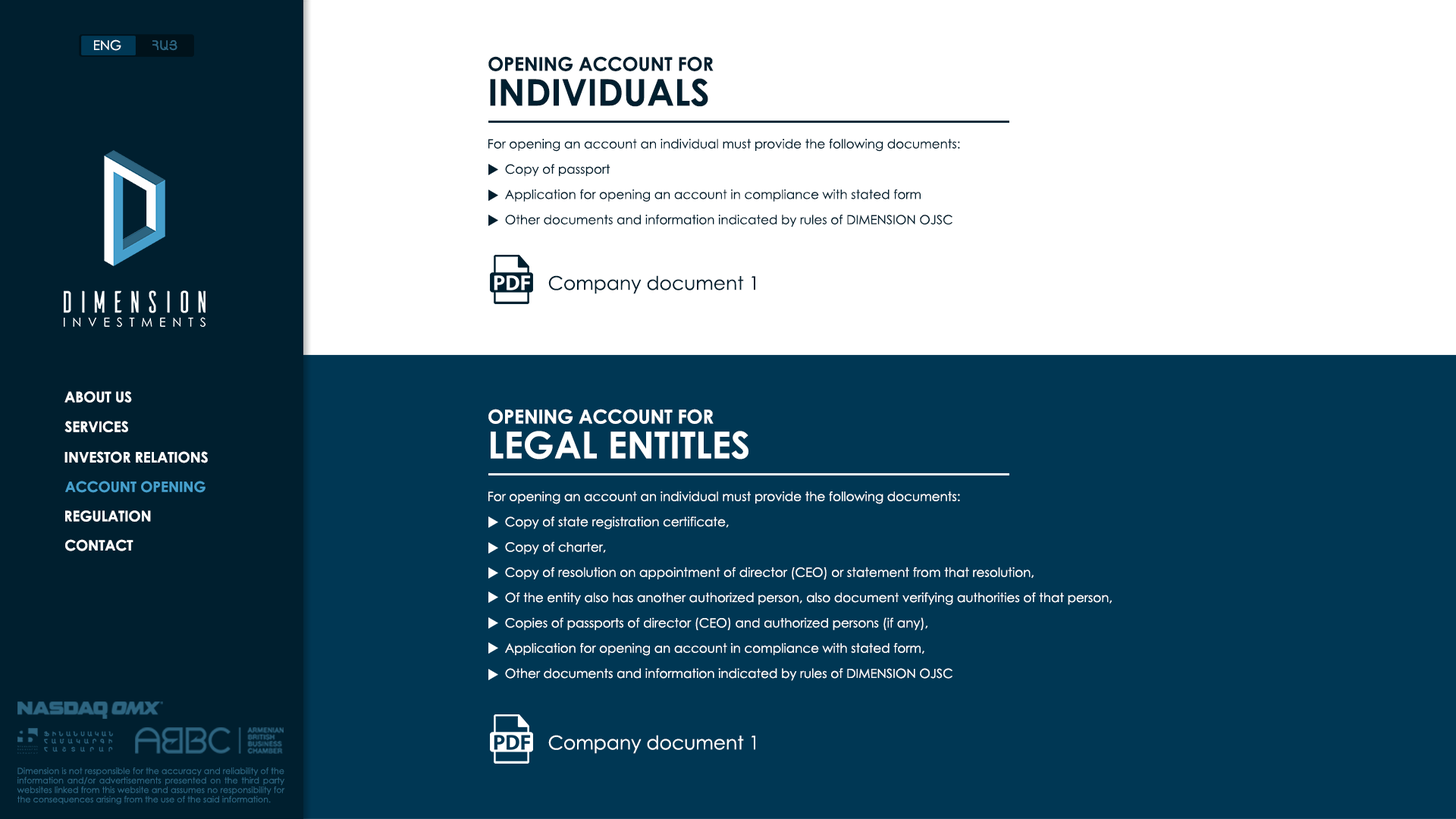
<style>
.page{position:relative;width:1456px;height:819px;background:#003754}
.page>*{position:absolute;margin:0}
.t1{font:13.2px "CenturyGothic";color:#ffffff}
.t2{font:13.2px "ArialAMU";color:#2d6480}
.t3{font:19px "CenturyGothic-Bold";color:#001f2f}
.t4{font:36.9px "CenturyGothic-Bold";color:#001f2f}
.t5{font:12.6px/12.6px "CenturyGothic";color:#001f2f}
.t6{font:19px "CenturyGothic";color:#001f2f}
.t7{font:14.5px "CenturyGothic-Bold";color:#ffffff}
.t8{font:19px "CenturyGothic-Bold";color:#ffffff}
.t9{font:36.9px "CenturyGothic-Bold";color:#ffffff}
.t10{font:14.5px "CenturyGothic-Bold";color:#469fcc}
.t11{font:12.6px/12.6px "CenturyGothic";color:#ffffff}
.t12{font:19px "CenturyGothic";color:#ffffff}
.t13{font:8.4px/9.5px "CenturyGothic";color:#2d6480}
</style>
<div class="page">
<p class="t1" style="left:94px;top:39px;width:27px;height:12px">ENG</p>
<p class="t2" style="left:152px;top:40px;width:25px;height:11px">ՀԱՅ</p>
<p class="t3" style="left:488px;top:56px;width:226px;height:15px">OPENING ACCOUNT FOR</p>
<p class="t4" style="left:490px;top:78px;width:218px;height:29px">INDIVIDUALS</p>
<p class="t5" style="left:488px;top:139px;width:472px;height:88px;text-align:justify">For opening an account an individual must provide the following documents:<br><br>     Copy of passport<br>   <br>     Application for opening an account in compliance with stated form<br>   <br>     Other documents and information indicated by rules of DIMENSION OJSC</p>
<p class="t6" style="left:548px;top:275px;width:207px;height:19px">Company document 1</p>
<p class="t7" style="left:64px;top:391px;width:68px;height:12px">ABOUT US</p>
<p class="t8" style="left:488px;top:409px;width:226px;height:15px">OPENING ACCOUNT FOR</p>
<p class="t7" style="left:64px;top:421px;width:64px;height:11px">SERVICES</p>
<p class="t9" style="left:491px;top:431px;width:257px;height:29px">LEGAL ENTITLES</p>
<p class="t7" style="left:64px;top:451px;width:144px;height:12px">INVESTOR RELATIONS</p>
<p class="t10" style="left:65px;top:481px;width:141px;height:12px">ACCOUNT OPENING</p>
<p class="t11" style="left:488px;top:491px;width:624px;height:190px;text-align:justify">For opening an account an individual must provide the following documents:<br><br>     Copy of state registration certificate,<br><br>     Copy of charter,<br><br>     Copy of resolution on appointment of director (CEO) or statement from that resolution,<br><br>     Of the entity also has another authorized person, also document verifying authorities of that person,<br><br>     Copies of passports of director (CEO) and authorized persons (if any),<br><br>     Application for opening an account in compliance with stated form,<br>   <br>     Other documents and information indicated by rules of DIMENSION OJSC</p>
<p class="t7" style="left:65px;top:510px;width:86px;height:12px">REGULATION</p>
<p class="t7" style="left:65px;top:539px;width:68px;height:12px">CONTACT</p>
<p class="t12" style="left:548px;top:735px;width:207px;height:19px">Company document 1</p>
<p class="t13" style="left:17px;top:767px;width:268px;height:38px;text-align:justify">Dimension is not responsible for the accuracy and reliability of the information and/or advertisements presented on the third party websites linked from this website and assumes no responsibility for the consequences arising from the use of the said information.</p>
</div>
